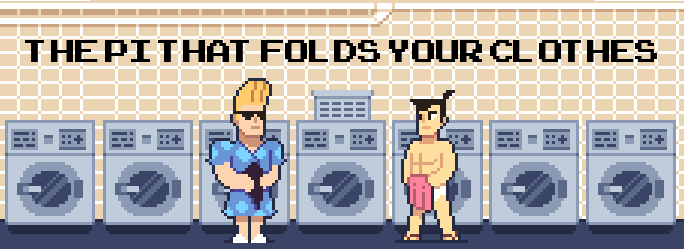
<style>
.page{position:relative;width:684px;height:249px;background:#ebd4b2}
.page>*{position:absolute;margin:0}
.t1{font:44px "ArcadeClassic";color:#000000}
</style>
<div class="page">
<p class="t1" style="left:25px;top:40px;width:632px;height:22px">The Pi that Folds your Clothes</p>
</div>
